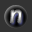
<style>
.page{position:relative;width:32px;height:32px;background:#333333}
.page>*{position:absolute;margin:0}
.t1{font:24px "Candara-Italic"}
</style>
<div class="page">
<p class="t1" style="left:10px;top:10px;width:11px;height:13px">n</p>
</div>
